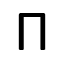
<style>
.page{position:relative;width:64px;height:64px;background:#ffffff}
.page>*{position:absolute;margin:0}
.t1{font:58.3px "Calibri";color:#000000}
</style>
<div class="page">
<p class="t1" style="left:18px;top:13px;width:28px;height:37px">П</p>
</div>
